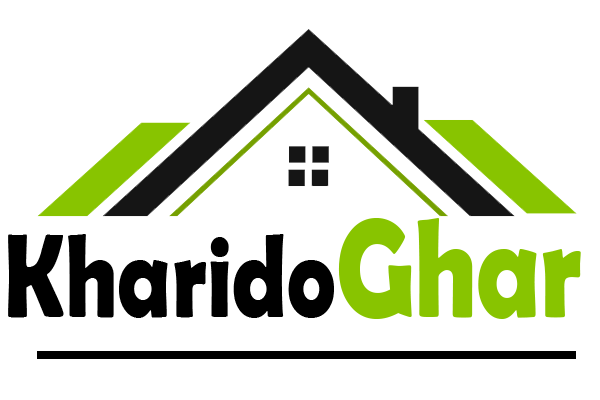
<style>
.page{position:relative;width:600px;height:400px;background:#ffffff}
.page>*{position:absolute;margin:0}
.t1{font:118.9px "BerlinSansFBDemi-Bold";color:#000000;scale:0.78 1}
.t2{font:141.1px "BerlinSansFBDemi-Bold";color:#88c400;scale:0.78 1}
</style>
<div class="page">
<p class="t1" style="left:8px;top:218px;width:573px;height:101px">Kharido<span class="t2">Ghar</span></p>
</div>
